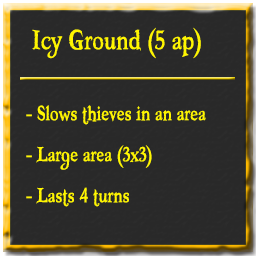
<style>
.page{position:relative;width:256px;height:256px;background:#292929}
.page>*{position:absolute;margin:0}
.t1{font:40px "Booter-ZeroZero";color:#fff600}
.t2{font:30px "Booter-ZeroZero";color:#fff600}
</style>
<div class="page">
<p class="t1" style="left:32px;top:27px;width:169px;height:32px">Icy Ground (5 ap)</p>
<p class="t2" style="left:26px;top:105px;width:180px;height:20px">- Slows thieves in an area</p>
<p class="t2" style="left:26px;top:145px;width:126px;height:25px">- Large area (3x3)</p>
<p class="t2" style="left:26px;top:187px;width:103px;height:20px">- Lasts 4 turns</p>
</div>
